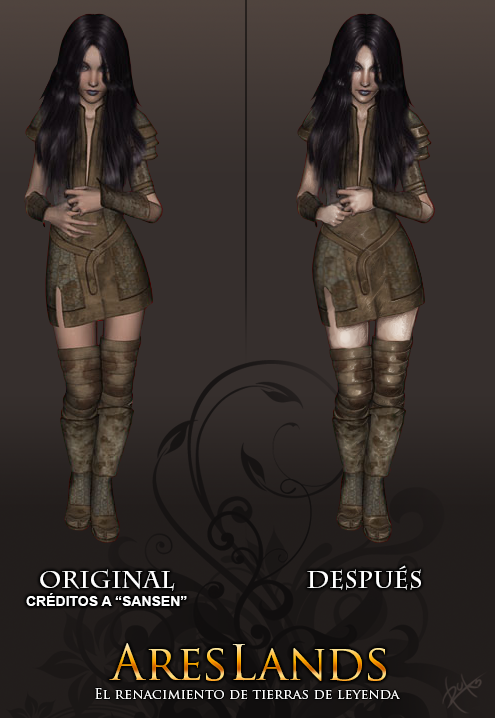
<style>
.page{position:relative;width:495px;height:718px}
.page>*{position:absolute;margin:0}
.t1{font:24px "CharlemagneStd-Bold";color:#ffffff}
.t2{font:14px "Arial-BoldMT";color:#ffffff}
.t3{font:48px "TrajanPro-Regular"}
.t4{font:14px "TrajanPro-Regular";color:#ffffff}
</style>
<div class="page">
<p class="t1" style="left:40px;top:565px;width:381px;height:26px">ORIGINAL                      DESPUÉS</p>
<p class="t2" style="left:26px;top:593px;width:161px;height:13px">CRÉDITOS A “SANSEN”</p>
<p class="t3" style="left:109px;top:643px;width:277px;height:38px">AresLands</p>
<p class="t4" style="left:95px;top:688px;width:305px;height:11px">El renacimiento de tierras de leyenda</p>
</div>
